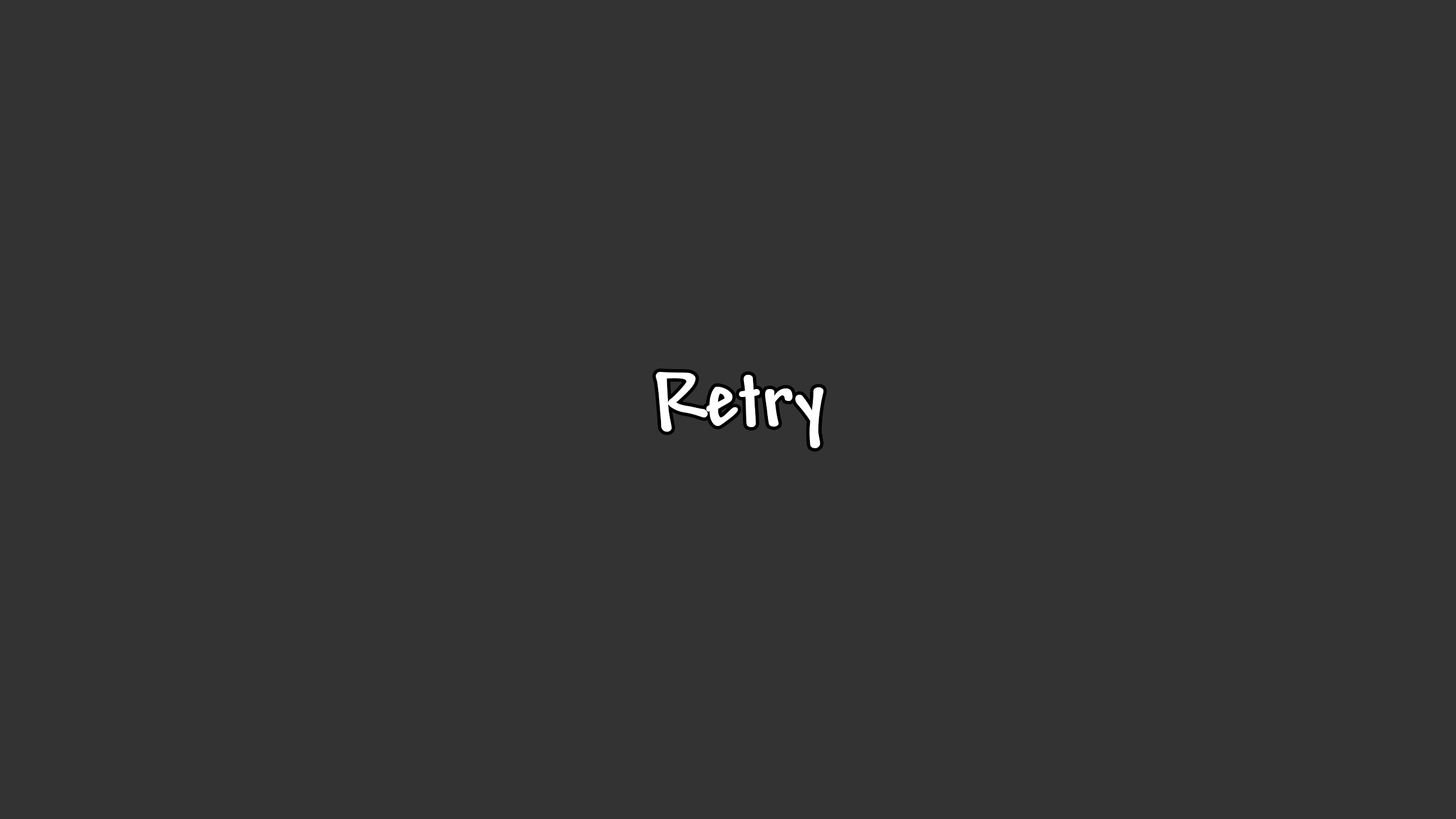
<style>
.page{position:relative;width:1456px;height:819px;background:#333333}
.page>*{position:absolute;margin:0}
.t1{font:85.3px "Andy-Bold";color:#ffffff}
</style>
<div class="page">
<p class="t1" style="left:655px;top:372px;width:169px;height:76px">Retry</p>
</div>
